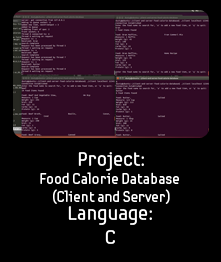
<style>
.page{position:relative;width:221px;height:262px;background:#000000}
.page>*{position:absolute;margin:0}
.t1{font:15px "SamsungImaginationBold";color:#ffffff}
.t2{font:20px "SamsungImaginationBold";color:#ffffff}
</style>
<div class="page">
<p class="t1" style="left:40px;top:152px;width:139px;height:52px;text-align:center"><span class="t2">Project:<br></span>Food Calorie Database <br>(Client and Server)</p>
<p class="t2" style="left:68px;top:206px;width:84px;height:38px;text-align:center">Language:<br>C</p>
</div>
